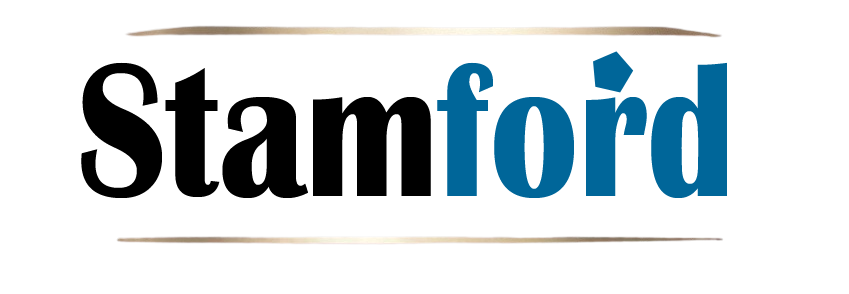
<style>
.page{position:relative;width:849px;height:294px;background:#ffffff}
.page>*{position:absolute;margin:0}
.t1{font:196.2px "BritannicBold";color:#000000;scale:0.83 1}
.t2{font:196.2px "BritannicBold";color:#006699;scale:0.83 1}
</style>
<div class="page">
<p class="t1" style="left:81px;top:62px;width:646px;height:136px">Stam<span class="t2">ford</span></p>
</div>
